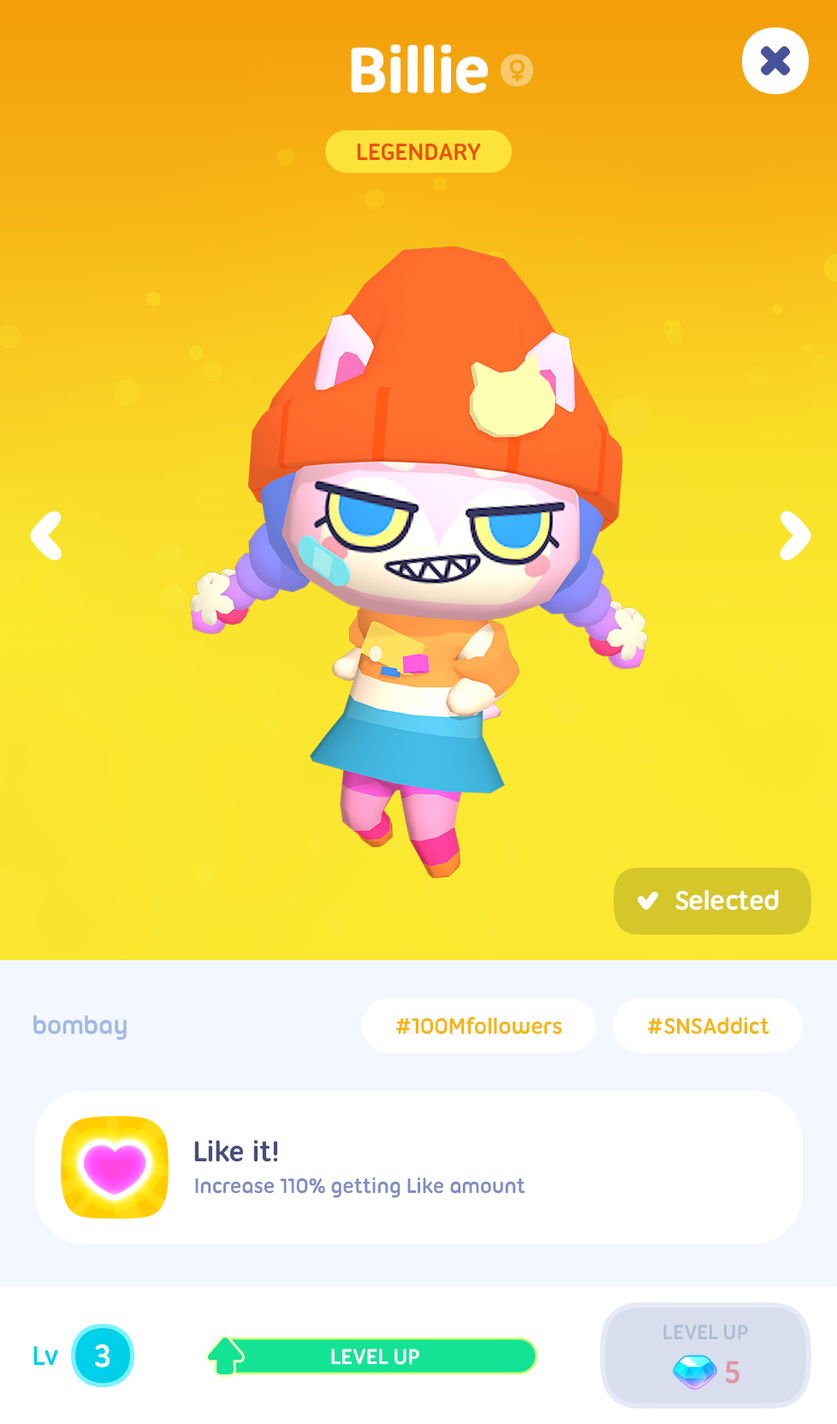
<style>
.page{position:relative;width:837px;height:1424px}
.page>*{position:absolute;margin:0}
.t1{font:68.5px "UbuntuTitling-Bold";letter-spacing:-0.025em;color:#ffffff;font-weight:bold}
.t2{font:25.7px "UbuntuTitling-Bold";letter-spacing:-0.025em;color:#e9520f;text-transform:uppercase}
.t3{font:29.1px "UbuntuTitling-Bold";letter-spacing:-0.025em;color:#ffffff}
.t4{font:27.4px "UbuntuTitling-Bold";letter-spacing:-0.025em;color:#a0b9e6}
.t5{font:24px "UbuntuTitling-Bold";letter-spacing:-0.025em;color:#f5b516}
.t6{font:30.8px "UbuntuTitling-Bold";letter-spacing:-0.025em;color:#454e7b}
.t7{font:22.3px "UbuntuTitling-Bold";letter-spacing:-0.025em;color:#818cc2}
.t8{font:22.3px "UbuntuTitling-Bold";letter-spacing:-0.035em;color:#b1bcd3;text-transform:uppercase}
.t9{font:29.1px "UbuntuTitling-Bold";letter-spacing:-0.025em;color:#00d0e9}
.t10{font:34.2px "UbuntuTitling-Bold";letter-spacing:-0.025em;color:#ffffff}
.t11{font:23.3px "UbuntuTitling-Bold";letter-spacing:-0.025em;color:#ffffff;text-transform:uppercase}
.t12{font:34.2px "UbuntuTitling-Bold";letter-spacing:-0.025em;color:#df96a4}
</style>
<div class="page">
<p class="t1" style="left:351px;top:45px;width:137px;height:48px">Billie</p>
<p class="t2" style="left:357px;top:143px;width:124px;height:18px">Legendary</p>
<p class="t3" style="left:675px;top:889px;width:104px;height:22px">Selected</p>
<p class="t4" style="left:33px;top:1015px;width:94px;height:25px">bombay</p>
<p class="t5" style="left:396px;top:1017px;width:166px;height:18px">#100Mfollowers</p>
<p class="t5" style="left:648px;top:1017px;width:122px;height:18px">#SNSAddict</p>
<p class="t6" style="left:194px;top:1140px;width:83px;height:22px">Like it!</p>
<p class="t7" style="left:195px;top:1178px;width:331px;height:20px">Increase 110% getting Like amount</p>
<p class="t8" style="left:663px;top:1325px;width:85px;height:15px">Level Up</p>
<p class="t9" style="left:33px;top:1346px;width:25px;height:20px">Lv</p>
<p class="t10" style="left:95px;top:1345px;width:15px;height:23px">3</p>
<p class="t11" style="left:331px;top:1349px;width:88px;height:16px">Level up</p>
<p class="t12" style="left:726px;top:1361px;width:14px;height:23px">5</p>
</div>
